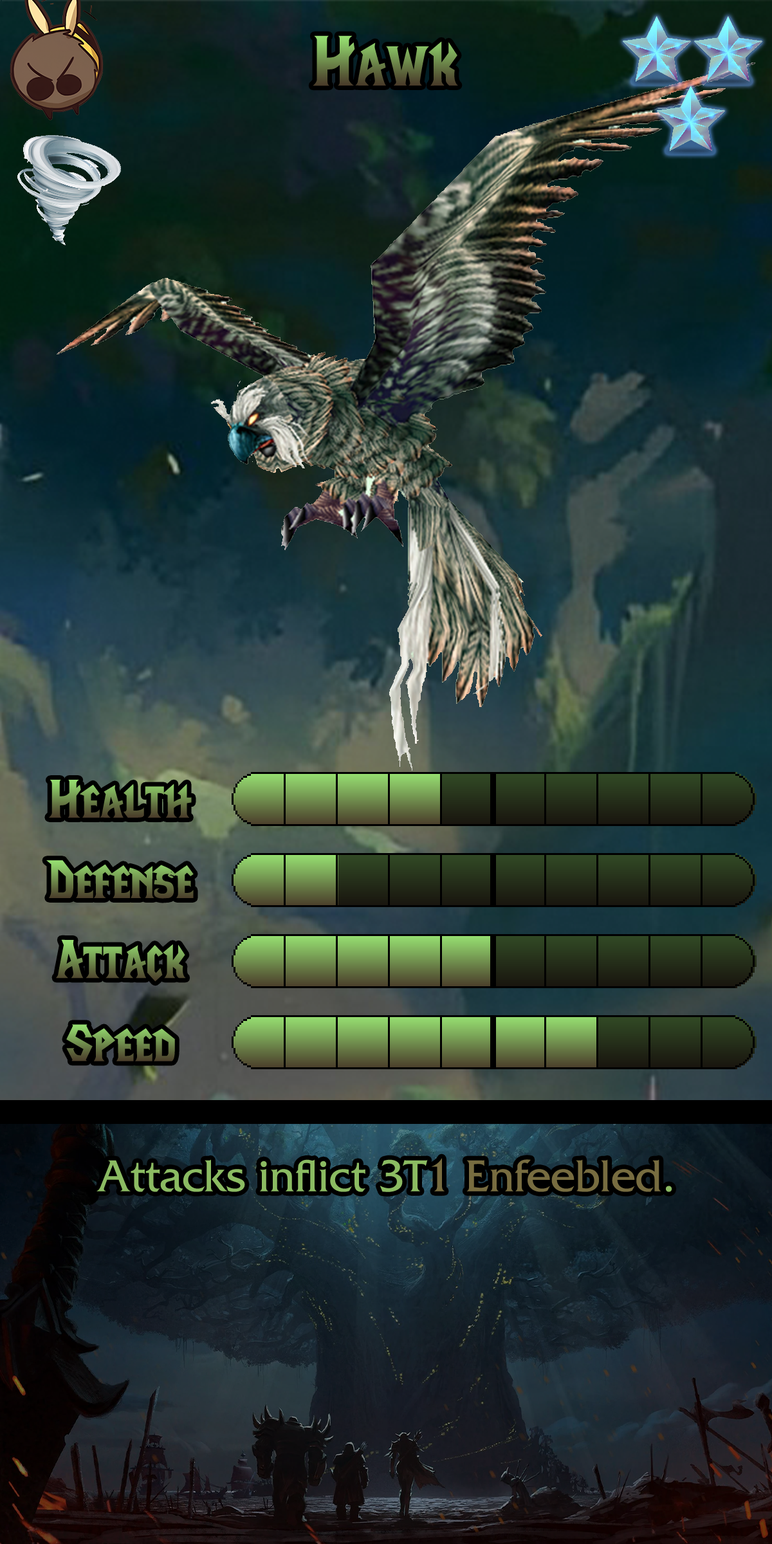
<style>
.page{position:relative;width:772px;height:1544px}
.page>*{position:absolute;margin:0}
.t1{font:121.6px "LifeCraft"}
.t2{font:92.7px "LifeCraft"}
.t3{font:79.8px "FrizQuadrataStd";color:#8bbb62}
.t4{font:79.8px "FrizQuadrataStd";color:#776c40}
</style>
<div class="page">
<p class="t1" style="left:313px;top:35px;width:145px;height:51px">Hawk</p>
<p class="t2" style="left:49px;top:780px;width:143px;height:38px">Health</p>
<p class="t2" style="left:46px;top:860px;width:148px;height:39px">Defense</p>
<p class="t2" style="left:56px;top:939px;width:130px;height:43px">Attack</p>
<p class="t2" style="left:66px;top:1024px;width:109px;height:38px">Speed</p>
<p class="t3" style="left:97px;top:1158px;width:575px;height:34px">Attacks inflict 3T<span class="t4">1 Enfeebled</span>.</p>
</div>
